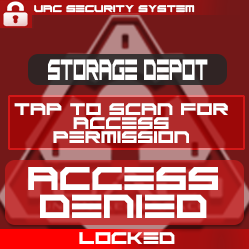
<style>
.page{position:relative;width:249px;height:249px}
.page>*{position:absolute;margin:0}
.t1{font:6.8px "ScifiAdventure";color:#ffffff}
.t2{font:20.5px "ScifiAdventure";color:#ffffff;scale:0.46 1}
.t3{font:11.7px "ScifiAdventure";color:#ffffff}
.t4{font:23.3px "ScifiAdventure";color:#ffffff}
</style>
<div class="page">
<p class="t1" style="left:34px;top:5px;width:161px;height:8px">UAC SECURITY SYSTEM</p>
<p class="t2" style="left:48px;top:59px;width:160px;height:21px">Storage Depot</p>
<p class="t3" style="left:14px;top:103px;width:214px;height:40px;text-align:center">TAP TO SCAN FOR ACCESS <br>PERMISSION</p>
<p class="t4" style="left:28px;top:167px;width:190px;height:51px;text-align:center">ACCESS DENIED</p>
<p class="t3" style="left:79px;top:232px;width:96px;height:12px">LOCKED</p>
</div>
